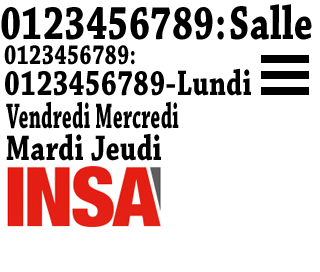
<style>
.page{position:relative;width:320px;height:272px;background:#ffffff}
.page>*{position:absolute;margin:0}
.t1{font:49.8px "ChaparralPro-Bold";letter-spacing:0.01em;color:#000000;scale:0.75 1}
.t2{font:29.1px "ChaparralPro-Bold";letter-spacing:0.01em;color:#000000;scale:0.75 1}
.t3{font:37.4px "ChaparralPro-Bold";letter-spacing:0.01em;color:#000000;scale:0.75 1}
.t4{font:37.4px "ChaparralPro-Bold";letter-spacing:0.01em;color:#000000;scale:0.53 1}
</style>
<div class="page">
<p class="t1" style="left:1px;top:6px;width:223px;height:34px">0123456789:</p>
<p class="t1" style="left:230px;top:4px;width:82px;height:36px">Salle</p>
<p class="t2" style="left:4px;top:45px;width:131px;height:20px">0123456789:</p>
<p class="t3" style="left:5px;top:68px;width:246px;height:28px">0123456789-Lundi</p>
<p class="t4" style="left:6px;top:101px;width:173px;height:28px">Vendredi Mercredi</p>
<p class="t3" style="left:6px;top:133px;width:155px;height:28px">Mardi Jeudi</p>
</div>
